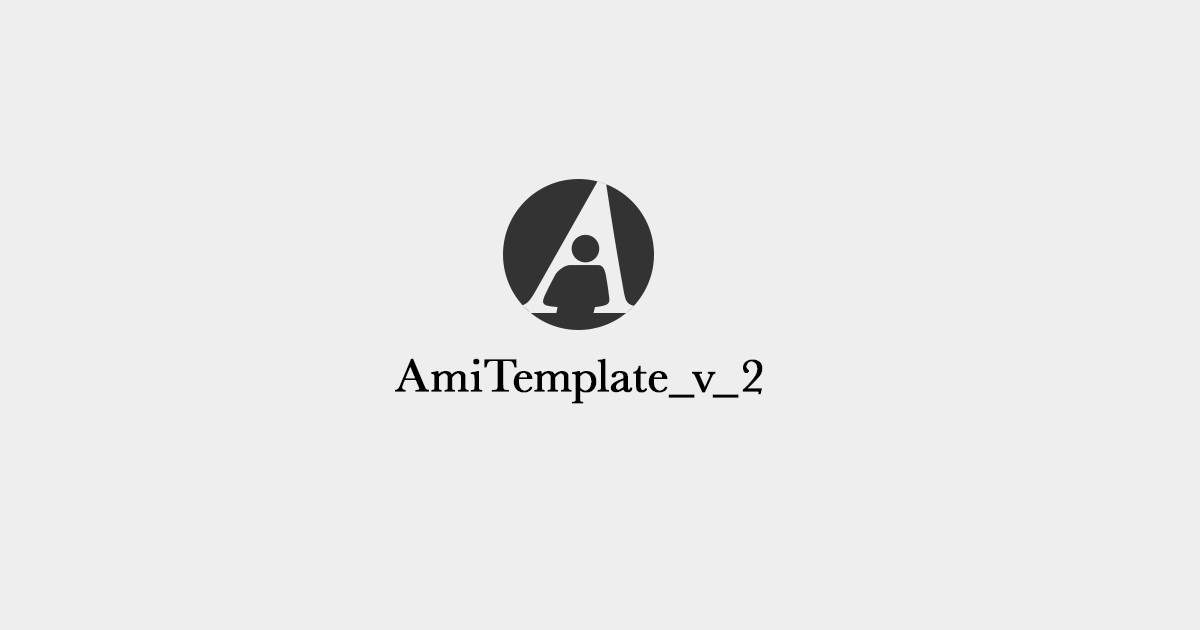
<style>
.page{position:relative;width:1200px;height:630px;background:#eeeeee}
.page>*{position:absolute;margin:0}
.t1{font:48px "Baskerville";color:#000000;font-weight:bold}
</style>
<div class="page">
<p class="t1" style="left:395px;top:358px;width:368px;height:46px">AmiTemplate_v_2</p>
</div>
